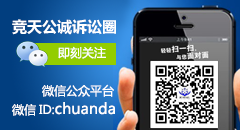
<style>
.page{position:relative;width:240px;height:130px}
.page>*{position:absolute;margin:0}
.t1{font:15px "MicrosoftYaHei-Bold";color:#ffffff}
.t2{font:12px "MicrosoftYaHei";color:#ffffff}
.t3{font:15px "MicrosoftYaHei";color:#ffffff}
</style>
<div class="page">
<p class="t1" style="left:12px;top:19px;width:104px;height:16px">竞天公诚诉讼圈</p>
<p class="t2" style="left:58px;top:46px;width:48px;height:13px">即刻关注</p>
<p class="t2" style="left:42px;top:84px;width:72px;height:13px">微信公众平台</p>
<p class="t3" style="left:12px;top:102px;width:103px;height:14px"><span class="t2">微信ID:</span>chuanda</p>
</div>
